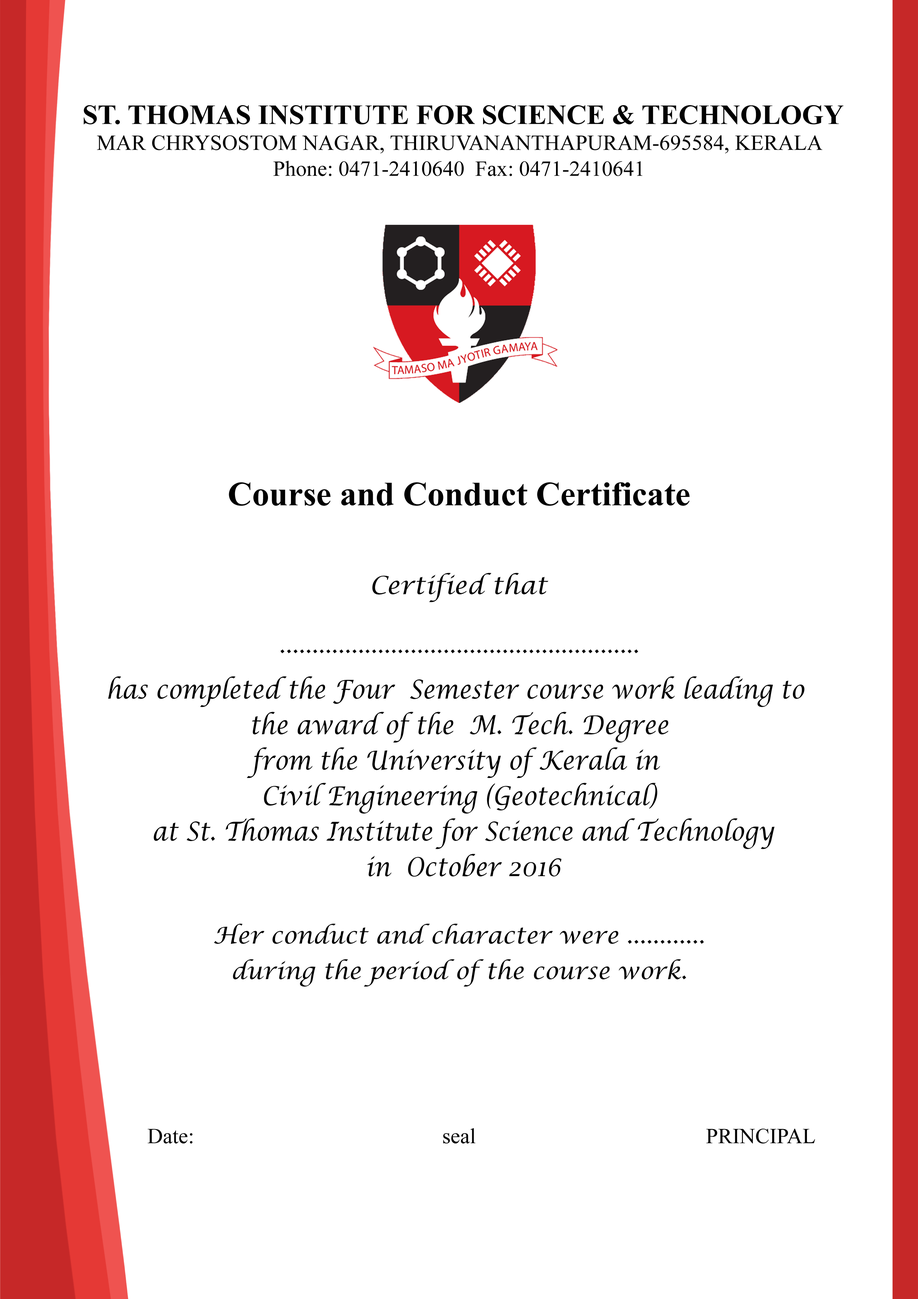
<style>
.page{position:relative;width:918px;height:1299px;background:#ffffff}
.page>*{position:absolute;margin:0}
.t1{font:21.6px "TimesNewRomanPSMT";color:#010101}
.t2{font:27.8px "TimesNewRomanPS-BoldMT";color:#010101}
.t3{font:33.9px "TimesNewRomanPS-BoldMT";color:#010101}
.t4{font:24.7px "LucidaCalligraphy-Italic";color:#010101}
.t5{font:23.1px "LucidaCalligraphy-Italic";color:#010101}
.t6{font:25.9px/35.5px "LucidaCalligraphy-Italic";color:#010101;scale:0.89 1}
.t7{font:23.1px/35.5px "LucidaCalligraphy-Italic";color:#010101}
</style>
<div class="page">
<p class="t1" style="left:84px;top:105px;width:760px;height:71px;text-align:center"><span class="t2"> ST. THOMAS INSTITUTE FOR SCIENCE &amp; TECHNOLOGY<br></span>MAR CHRYSOSTOM NAGAR, THIRUVANANTHAPURAM-695584, KERALA<br>Phone: 0471-2410640  Fax: 0471-2410641</p>
<p class="t3" style="left:229px;top:482px;width:461px;height:24px">Course and Conduct Certificate</p>
<p class="t4" style="left:372px;top:573px;width:177px;height:29px">Certified that</p>
<p class="t5" style="left:280px;top:649px;width:358px;height:4px">.......................................................</p>
<p class="t6" style="left:108px;top:676px;width:696px;height:201px;text-align:center">has completed the Four  Semester course work leading to <br>the award of the  M. Tech. Degree<br>from the University of Kerala in <br>Civil Engineering (Geotechnical)<br> at St. Thomas Institute for Science and Technology<br> in  October 2016</p>
<p class="t7" style="left:214px;top:923px;width:490px;height:64px;text-align:center">Her conduct and character were ............<br>during the period of the course work.</p>
<p class="t1" style="left:148px;top:1128px;width:45px;height:15px">Date:</p>
<p class="t1" style="left:443px;top:1128px;width:33px;height:15px">seal</p>
<p class="t1" style="left:706px;top:1128px;width:109px;height:15px">PRINCIPAL</p>
</div>
